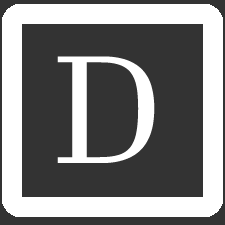
<style>
.page{position:relative;width:225px;height:225px;background:#333333}
.page>*{position:absolute;margin:0}
.t1{font:150px "JavaneseText";letter-spacing:0.035em;color:#ffffff}
</style>
<div class="page">
<p class="t1" style="left:57px;top:56px;width:98px;height:107px">D</p>
</div>
